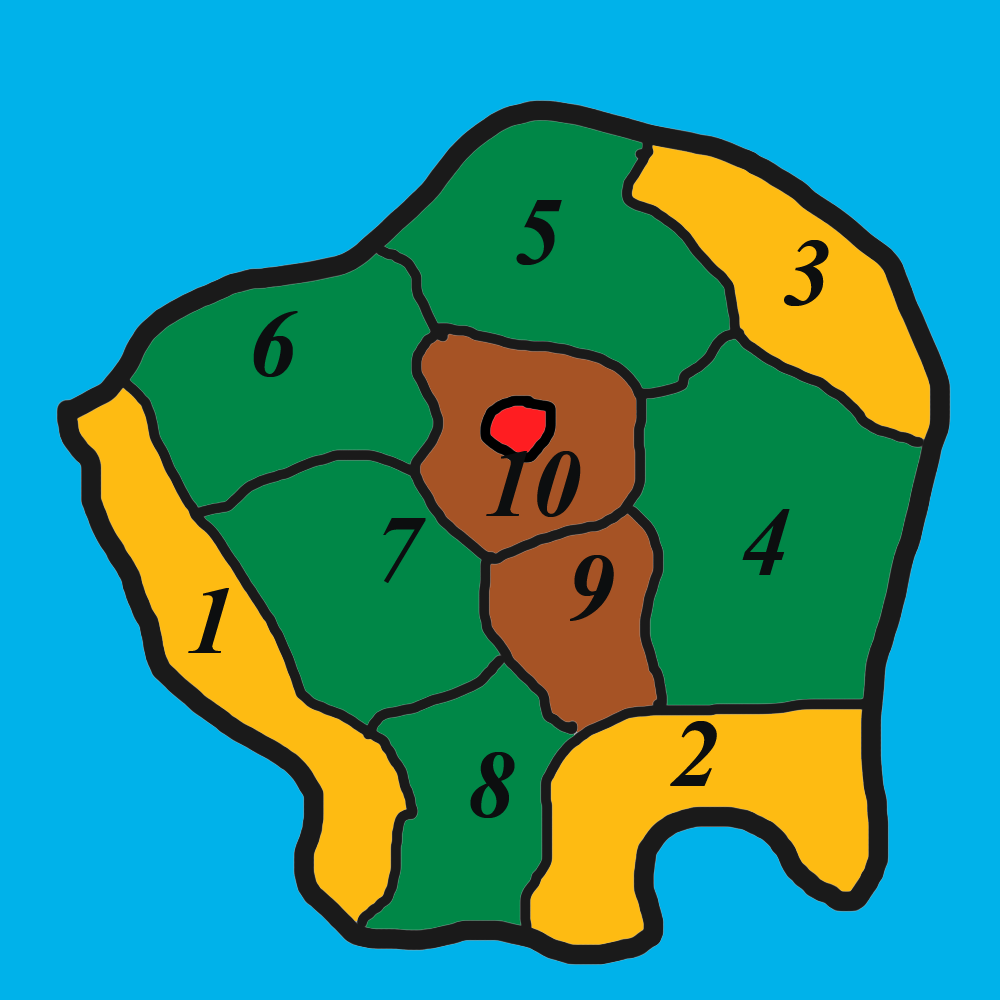
<style>
.page{position:relative;width:1000px;height:1000px;background:#00b2ea}
.page>*{position:absolute;margin:0}
.t1{font:120px "Vijaya-Bold";color:#0c0e0f}
</style>
<div class="page">
<p class="t1" style="left:516px;top:200px;width:46px;height:65px">5</p>
<p class="t1" style="left:784px;top:240px;width:45px;height:66px">3</p>
<p class="t1" style="left:253px;top:311px;width:45px;height:66px">6</p>
<p class="t1" style="left:486px;top:451px;width:95px;height:66px">10</p>
<p class="t1" style="left:742px;top:509px;width:48px;height:66px">4</p>
<p class="t1" style="left:383px;top:518px;width:43px;height:65px">7</p>
<p class="t1" style="left:570px;top:555px;width:44px;height:66px">9</p>
<p class="t1" style="left:188px;top:588px;width:41px;height:65px">1</p>
<p class="t1" style="left:670px;top:721px;width:47px;height:65px">2</p>
<p class="t1" style="left:470px;top:752px;width:45px;height:66px">8</p>
</div>
